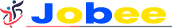
<style>
.page{position:relative;width:172px;height:28px;background:#ffffff}
.page>*{position:absolute;margin:0}
.t1{font:28.3px "Poppins-Bold";color:#ffe400;scale:1.55 1}
.t2{font:28.3px "Poppins-Bold";color:#004eff;scale:1.55 1}
</style>
<div class="page">
<p class="t1" style="left:31px;top:2px;width:135px;height:22px"><span class="t2">J</span>o<span class="t2">b</span>ee</p>
</div>
